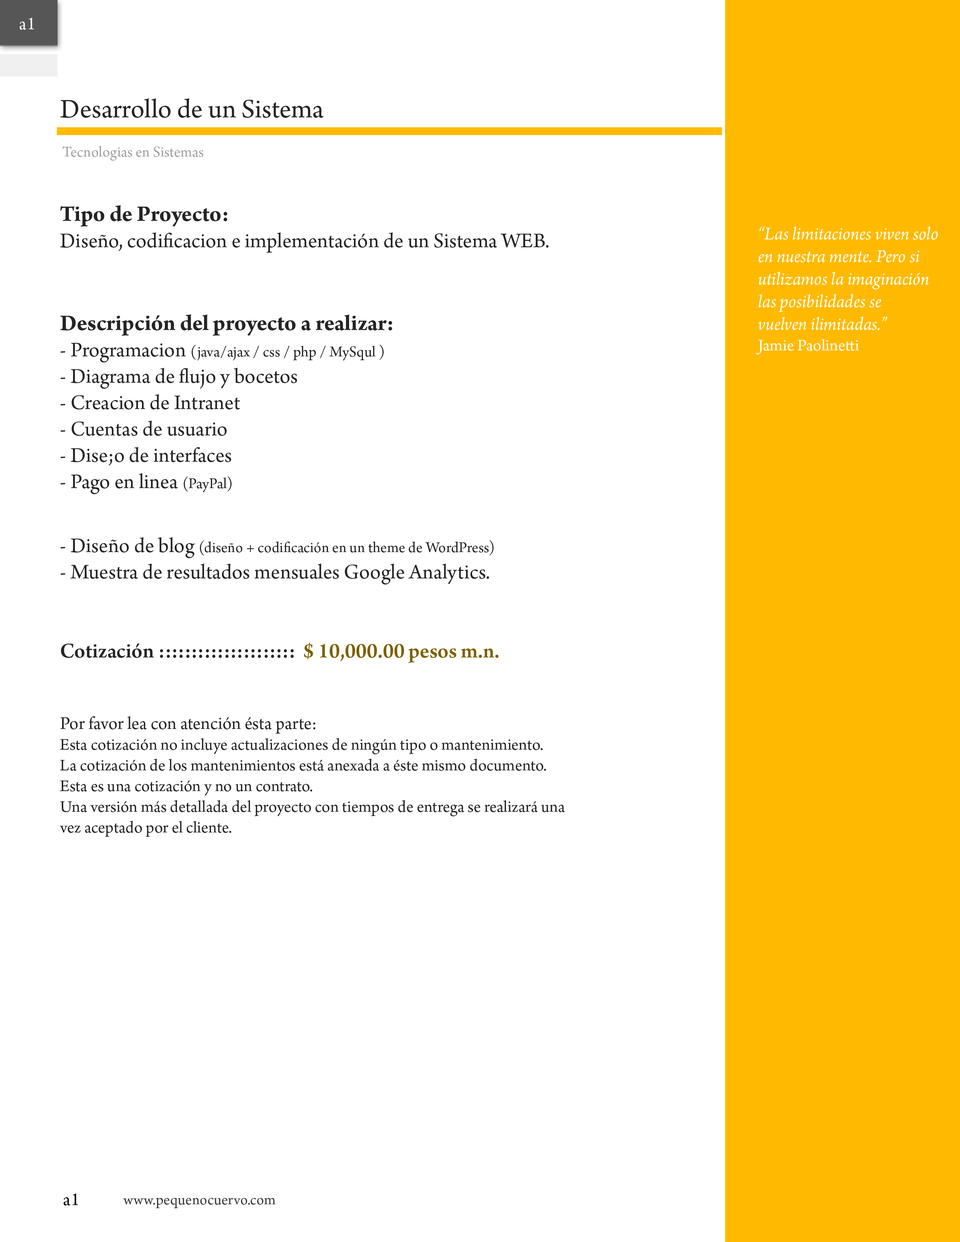
<style>
.page{position:relative;width:960px;height:1242px;background:#ffffff}
.page>*{position:absolute;margin:0}
.t1{font:18.8px "ArnoPro-Regular";color:#fcfcfc}
.t2{font:28.2px "ArnoPro-Regular";color:#252525}
.t3{font:15.7px "ArnoPro-Regular";color:#a0a0a0}
.t4{font:17.3px "ArnoPro-Regular";color:#252525}
.t5{font:23.5px "ArnoPro-Regular";color:#252525}
.t6{font:23.5px "ArnoPro-Bold";color:#252525}
.t7{font:22px "ArnoPro-Regular";color:#252525}
.t8{font:15.7px "ArnoPro-Regular";color:#252525}
.t9{font:22px "ArnoPro-Smbd";color:#252525}
.t10{font:22px "ArnoPro-Smbd";color:#7c6000}
.t11{font:18.8px "ArnoPro-Regular";color:#252525}
.t12{font:18.8px "ArnoPro-Italic";color:#ffffff}
.t13{font:17.3px "ArnoPro-Regular";color:#ffffff}
.t14{font:18.8px "ArnoPro-Regular";color:#010101}
.t15{font:15.7px "ArnoPro-Regular";color:#3c3c3c}
</style>
<div class="page">
<p class="t1" style="left:20px;top:18px;width:14px;height:12px">a1</p>
<p class="t2" style="left:60px;top:98px;width:263px;height:20px">Desarrollo de un Sistema</p>
<p class="t3" style="left:62px;top:146px;width:141px;height:15px">Tecnologias en Sistemas</p>
<p class="t4" style="left:59px;top:205px;width:506px;height:632px"><span class="t5"><br></span><span class="t6">Tipo de Proyecto: <br></span><span class="t7">Diseño, codificacion e implementación de un Sistema WEB.<br><br><br></span><span class="t6">Descripción del proyecto a realizar:<br></span><span class="t7">- Programacion </span><span class="t8">(java/ajax / css / php / MySqul )<br></span><span class="t7">- Diagrama de flujo y bocetos<br>- Creacion de Intranet<br>- Cuentas de usuario<br>- Dise;o de interfaces<br>- Pago en linea </span><span class="t8">(PayPal)<br><br><br></span><span class="t7">- Diseño de blog </span><span class="t8">(diseño + codificación en un theme de WordPress)<br></span><span class="t7">- Muestra de resultados mensuales Google Analytics.<br><br><br></span><span class="t9">Cotización :::::::::::::::::::::</span><span class="t10">  $ 10,000.00 pesos m.n.<br><br></span><span class="t11"><br>Por favor lea con atención ésta parte:<br></span>Esta cotización no incluye actualizaciones de ningún tipo o mantenimiento.<br>La cotización de los mantenimientos está anexada a éste mismo documento.<br>Esta es una cotización y no un contrato.<br>Una versión más detallada del proyecto con tiempos de entrega se realizará una <br>vez aceptado por el cliente.</p>
<p class="t12" style="left:756px;top:226px;width:182px;height:129px">“Las limitaciones viven solo<br>en nuestra mente. Pero si <br>utilizamos la imaginación<br>las posibilidades se<br>vuelven ilimitadas.”<br><span class="t13">Jamie Paolinetti</span></p>
<p class="t14" style="left:64px;top:1194px;width:14px;height:12px">a1</p>
<p class="t15" style="left:123px;top:1198px;width:153px;height:11px">www.pequenocuervo.com</p>
</div>
